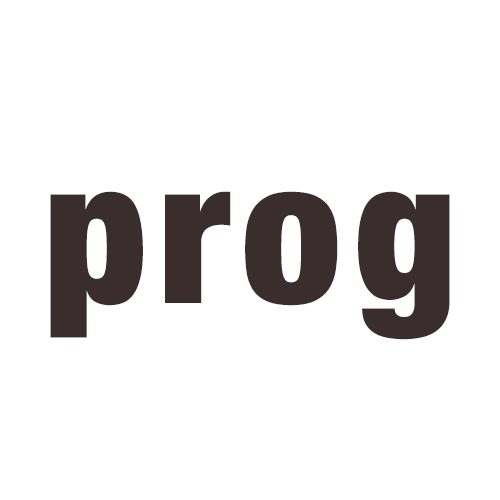
<style>
.page{position:relative;width:500px;height:500px;background:#ffffff}
.page>*{position:absolute;margin:0}
.t1{font:200px "HelveticaNeue-CondensedBlack";letter-spacing:0.06em;color:#3a2e2e}
</style>
<div class="page">
<p class="t1" style="left:50px;top:191px;width:400px;height:149px">prog</p>
</div>
